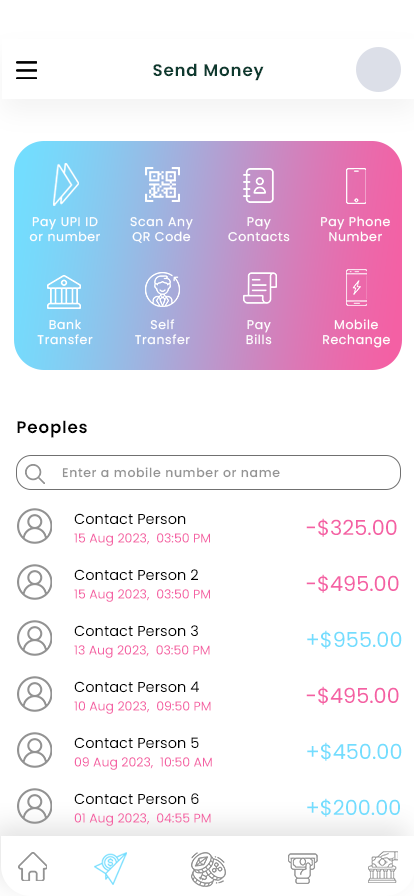
<style>
.page{position:relative;width:414px;height:896px;background:#ffffff}
.page>*{position:absolute;margin:0}
.t1{font:16.7px "Poppins-SemiBold";letter-spacing:0.05em;color:#0e3a2f}
.t2{font:12.5px "Poppins-Regular";letter-spacing:0.05em;color:#ffffff}
.t3{font:16.7px "Poppins-SemiBold";letter-spacing:0.05em;color:#010101}
.t4{font:12.5px "Poppins-Medium";letter-spacing:0.05em;color:#939393}
.t5{font:14.6px "Poppins-Regular";color:#010101}
.t6{font:20.8px "Poppins-Regular";color:#f460a4}
.t7{font:12.5px "Poppins-Regular";color:#f460a4}
.t8{font:20.8px "Poppins-Regular";color:#73ddfe}
</style>
<div class="page">
<p class="t1" style="left:153px;top:63px;width:111px;height:18px">Send Money</p>
<p class="t2" style="left:29px;top:217px;width:71px;height:25px;text-align:center">Pay UPI ID<br>or number</p>
<p class="t2" style="left:130px;top:217px;width:63px;height:26px;text-align:center">Scan Any<br>QR Code</p>
<p class="t2" style="left:228px;top:217px;width:62px;height:25px;text-align:center">Pay<br>Contacts</p>
<p class="t2" style="left:321px;top:216px;width:69px;height:26px;text-align:center">Pay Phone<br>Number</p>
<p class="t2" style="left:37px;top:319px;width:56px;height:26px;text-align:center">Bank<br>Transfer</p>
<p class="t2" style="left:135px;top:319px;width:55px;height:26px;text-align:center">Self<br>Transfer</p>
<p class="t2" style="left:246px;top:320px;width:26px;height:25px;text-align:center">Pay<br>Bills</p>
<p class="t2" style="left:323px;top:319px;width:67px;height:29px;text-align:center">Mobile<br>Rechange</p>
<p class="t3" style="left:17px;top:420px;width:70px;height:18px">Peoples</p>
<p class="t4" style="left:62px;top:467px;width:218px;height:11px">Enter a mobile number or name</p>
<p class="t5" style="left:74px;top:513px;width:112px;height:12px">Contact Person</p>
<p class="t6" style="left:306px;top:518px;width:91px;height:19px">-$325.00</p>
<p class="t7" style="left:74px;top:533px;width:136px;height:13px">15 Aug 2023,  03:50 PM</p>
<p class="t5" style="left:74px;top:569px;width:124px;height:12px">Contact Person 2</p>
<p class="t6" style="left:306px;top:574px;width:93px;height:19px">-$495.00</p>
<p class="t7" style="left:74px;top:589px;width:136px;height:13px">15 Aug 2023,  03:50 PM</p>
<p class="t5" style="left:74px;top:625px;width:124px;height:12px">Contact Person 3</p>
<p class="t8" style="left:307px;top:630px;width:95px;height:19px">+$955.00</p>
<p class="t7" style="left:74px;top:645px;width:136px;height:13px">13 Aug 2023,  03:50 PM</p>
<p class="t5" style="left:74px;top:681px;width:125px;height:12px">Contact Person 4</p>
<p class="t6" style="left:306px;top:686px;width:93px;height:19px">-$495.00</p>
<p class="t7" style="left:74px;top:701px;width:137px;height:13px">10 Aug 2023,  09:50 PM</p>
<p class="t5" style="left:74px;top:737px;width:125px;height:12px">Contact Person 5</p>
<p class="t8" style="left:307px;top:742px;width:95px;height:19px">+$450.00</p>
<p class="t7" style="left:74px;top:757px;width:138px;height:13px">09 Aug 2023,  10:50 AM</p>
<p class="t5" style="left:74px;top:793px;width:125px;height:12px">Contact Person 6</p>
<p class="t8" style="left:307px;top:798px;width:93px;height:19px">+$200.00</p>
<p class="t7" style="left:74px;top:813px;width:137px;height:13px">01 Aug 2023,  04:55 PM</p>
</div>
